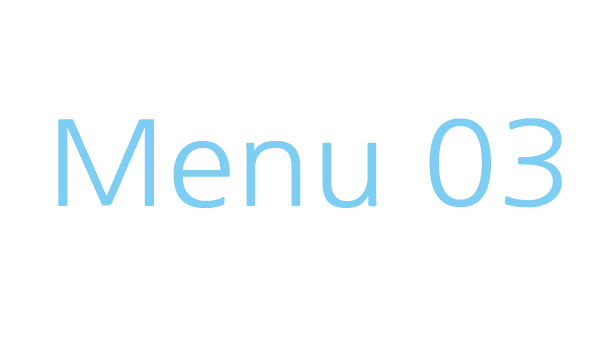
<style>
.page{position:relative;width:600px;height:337px;background:#ffffff}
.page>*{position:absolute;margin:0}
.t1{font:117px "NanumGothic";color:#7ecef4;scale:1.07 1}
</style>
<div class="page">
<p class="t1" style="left:58px;top:118px;width:504px;height:90px">Menu 03</p>
</div>
